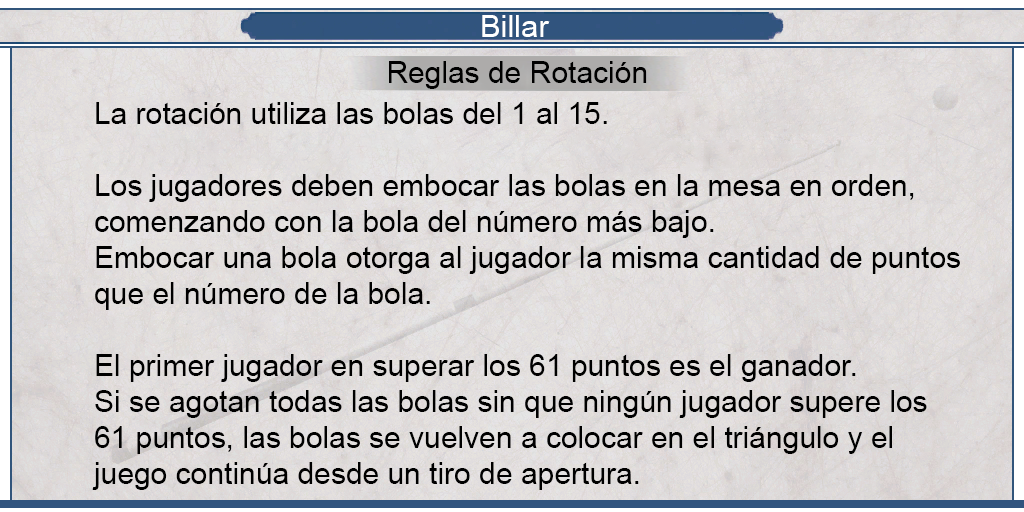
<style>
.page{position:relative;width:1024px;height:512px}
.page>*{position:absolute;margin:0}
.t1{font:30.8px "ArialMT";color:#ffffff}
.t2{font:30px "ArialMT";color:#000000}
</style>
<div class="page">
<p class="t1" style="left:482px;top:15px;width:68px;height:22px">Billar</p>
<p class="t2" style="left:389px;top:61px;width:258px;height:28px">Reglas de Rotación</p>
<p class="t2" style="left:92px;top:102px;width:868px;height:388px;text-align:justify">La rotación utiliza las bolas del 1 al 15.<br><br>Los jugadores deben embocar las bolas en la mesa en orden,<br>comenzando con la bola del número más bajo.<br>Embocar una bola otorga al jugador la misma cantidad de puntos<br>que el número de la bola.<br><br>El primer jugador en superar los 61 puntos es el ganador.<br>Si se agotan todas las bolas sin que ningún jugador supere los<br>61 puntos, las bolas se vuelven a colocar en el triángulo y el<br>juego continúa desde un tiro de apertura.</p>
</div>
